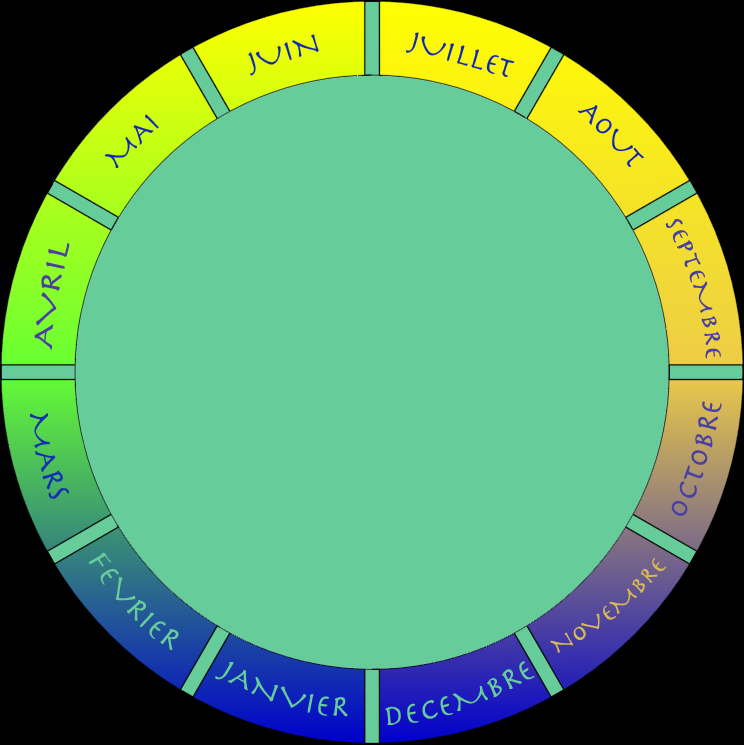
<style>
.page{position:relative;width:744px;height:745px;background:#66cc99}
.page>*{position:absolute;margin:0}
.t1{font:30px "Herculanum";color:#0f25b6}
.t2{font:24px "Herculanum";color:#4a40a3}
.t3{font:30px "Herculanum";color:#4a40a3}
.t4{font:30px "Herculanum";color:#1330af}
.t5{font:30px "Herculanum";color:#66cc99}
.t6{font:24px "Herculanum";color:#d7b954}
</style>
<div class="page">
<p class="t1" style="left:248px;top:34px;width:71px;height:42px;rotate:-17deg">JUIN</p>
<p class="t1" style="left:406px;top:32px;width:109px;height:45px;rotate:16deg">JUILLET</p>
<p class="t1" style="left:577px;top:105px;width:67px;height:62px;rotate:47deg">AOUT</p>
<p class="t1" style="left:104px;top:114px;width:55px;height:55px;rotate:-45deg">MAI</p>
<p class="t2" style="left:665px;top:219px;width:56px;height:140px;rotate:81deg">SEPTEMBRE</p>
<p class="t3" style="left:34px;top:243px;width:36px;height:107px;rotate:-68deg">AVRIL</p>
<p class="t3" style="left:671px;top:401px;width:51px;height:115px;rotate:-79deg">OCTOBRE</p>
<p class="t4" style="left:30px;top:413px;width:39px;height:86px;rotate:65deg">MARS</p>
<p class="t5" style="left:89px;top:552px;width:90px;height:98px;rotate:42deg">FEVRIER</p>
<p class="t6" style="left:550px;top:558px;width:117px;height:95px;rotate:-45deg">NOVEMBRE</p>
<p class="t5" style="left:215px;top:662px;width:133px;height:55px;rotate:16deg">JANVIER</p>
<p class="t5" style="left:385px;top:661px;width:150px;height:64px;rotate:-22deg">DECEMBRE</p>
</div>
